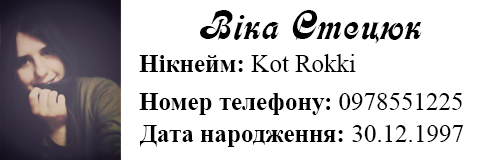
<style>
.page{position:relative;width:480px;height:160px;background:#ffffff}
.page>*{position:absolute;margin:0}
.t1{font:41.7px "Asessor";color:#000000}
.t2{font:25px "TimesNewRomanPSMT";color:#000000}
.t3{font:25px "TimesNewRomanPS-BoldMT";color:#000000}
</style>
<div class="page">
<p class="t1" style="left:200px;top:10px;width:222px;height:33px">Вiка Стецюк</p>
<p class="t2" style="left:139px;top:54px;width:217px;height:18px"><span class="t3">Нікнейм:</span> Kot Rokki</p>
<p class="t3" style="left:139px;top:93px;width:323px;height:22px">Номер телефону:<span class="t2"> 0978551225</span></p>
<p class="t3" style="left:140px;top:125px;width:323px;height:22px">Дата народження: <span class="t2">30.12.1997</span></p>
</div>
